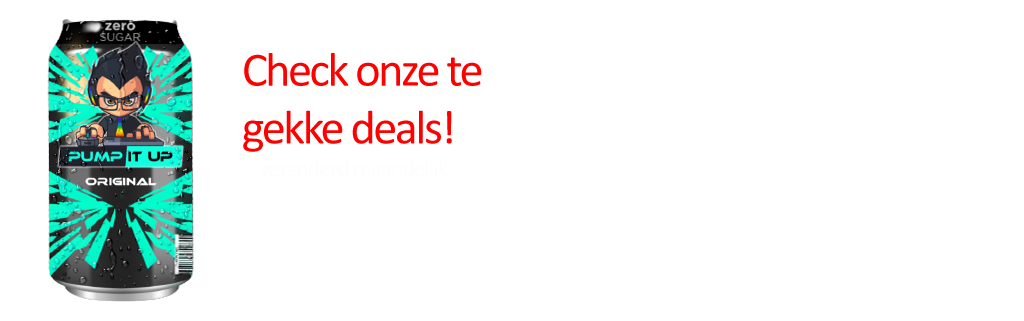
<style>
.page{position:relative;width:1024px;height:321px;background:#ffffff}
.page>*{position:absolute;margin:0}
.t1{font:48px "Calibri";letter-spacing:-0.05em;color:#ff0000}
</style>
<div class="page">
<p class="t1" style="left:243px;top:53px;width:239px;height:99px">Check onze te gekke deals!</p>
</div>
